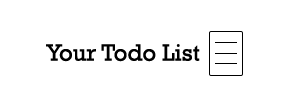
<style>
.page{position:relative;width:300px;height:100px;background:#ffffff}
.page>*{position:absolute;margin:0}
.t1{font:24px "Rockwell";color:#000000}
</style>
<div class="page">
<p class="t1" style="left:46px;top:44px;width:154px;height:18px">Your Todo List</p>
</div>
